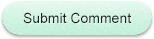
<style>
.page{position:relative;width:154px;height:39px}
.page>*{position:absolute;margin:0}
.t1{font:14px "ArialMT";color:#213424}
</style>
<div class="page">
<p class="t1" style="left:23px;top:12px;width:109px;height:12px">Submit Comment</p>
</div>
